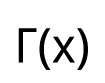
<style>
.page{position:relative;width:105px;height:83px;background:#ffffff}
.page>*{position:absolute;margin:0}
.t1{font:47.9px "DroidSans";color:#000000}
</style>
<div class="page">
<p class="t1" style="left:18px;top:28px;width:70px;height:42px">Г(x)</p>
</div>
